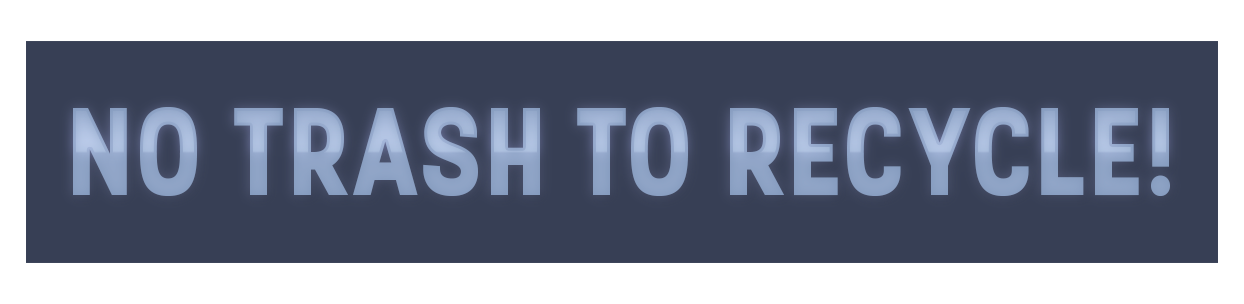
<style>
.page{position:relative;width:1244px;height:304px;background:#373f55}
.page>*{position:absolute;margin:0}
.t1{font:123.7px "Stellar-Bold";color:#8097ba}
</style>
<div class="page">
<p class="t1" style="left:73px;top:107px;width:1097px;height:90px">NO TRASH TO RECYCLE!</p>
</div>
